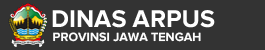
<style>
.page{position:relative;width:265px;height:50px;background:#333333}
.page>*{position:absolute;margin:0}
.t1{font:25px "Proxima_Nova_Bold";color:#ffffff}
.t2{font:12.5px "Proxima_Nova_Bold";color:#fefefe}
</style>
<div class="page">
<p class="t1" style="left:52px;top:10px;width:163px;height:18px">DINAS ARPUS</p>
<p class="t2" style="left:53px;top:32px;width:148px;height:10px">PROVINSI JAWA TENGAH</p>
</div>
